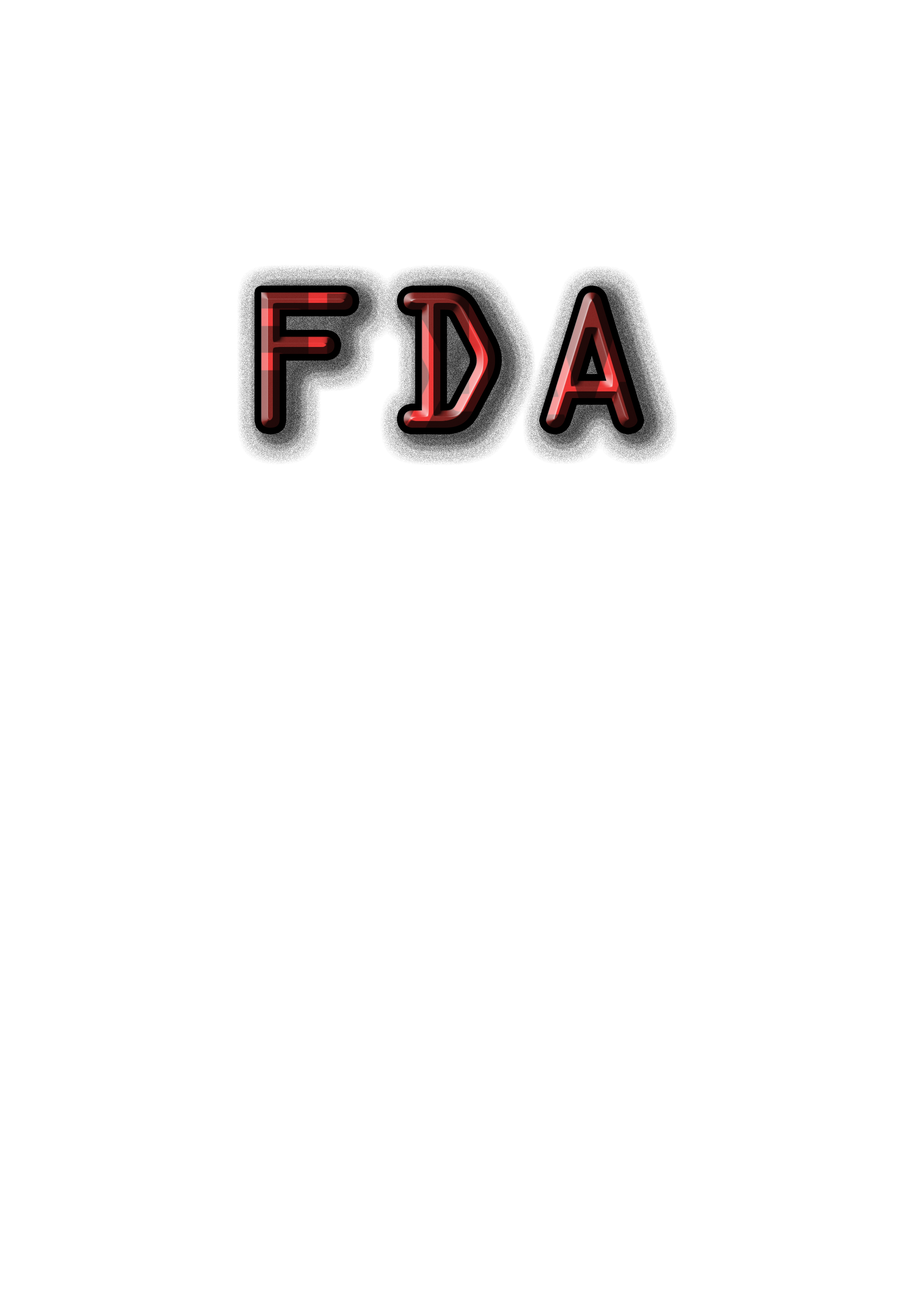
<style>
.page{position:relative;width:918px;height:1299px;background:#ffffff}
.page>*{position:absolute;margin:0}
.t1{font:174px "OCRAStd";letter-spacing:0.05em;scale:1.06 1}
</style>
<div class="page">
<p class="t1" style="left:261px;top:292px;width:377px;height:136px">FDA</p>
</div>
